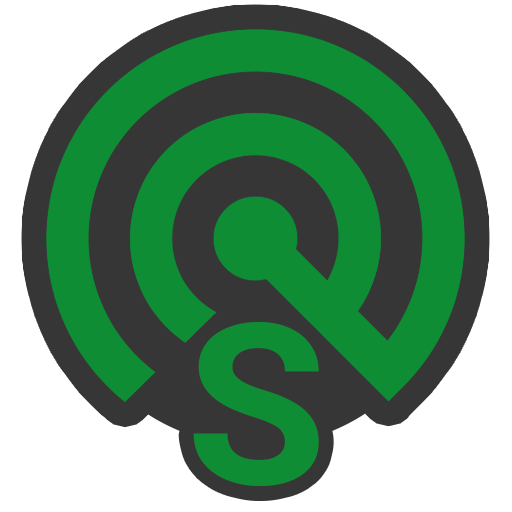
<style>
.page{position:relative;width:512px;height:512px;background:#ffffff}
.page>*{position:absolute;margin:0}
.t1{font:225px "Roboto-Bold";color:#0e8d35}
</style>
<div class="page">
<p class="t1" style="left:193px;top:322px;width:126px;height:164px">S</p>
</div>
